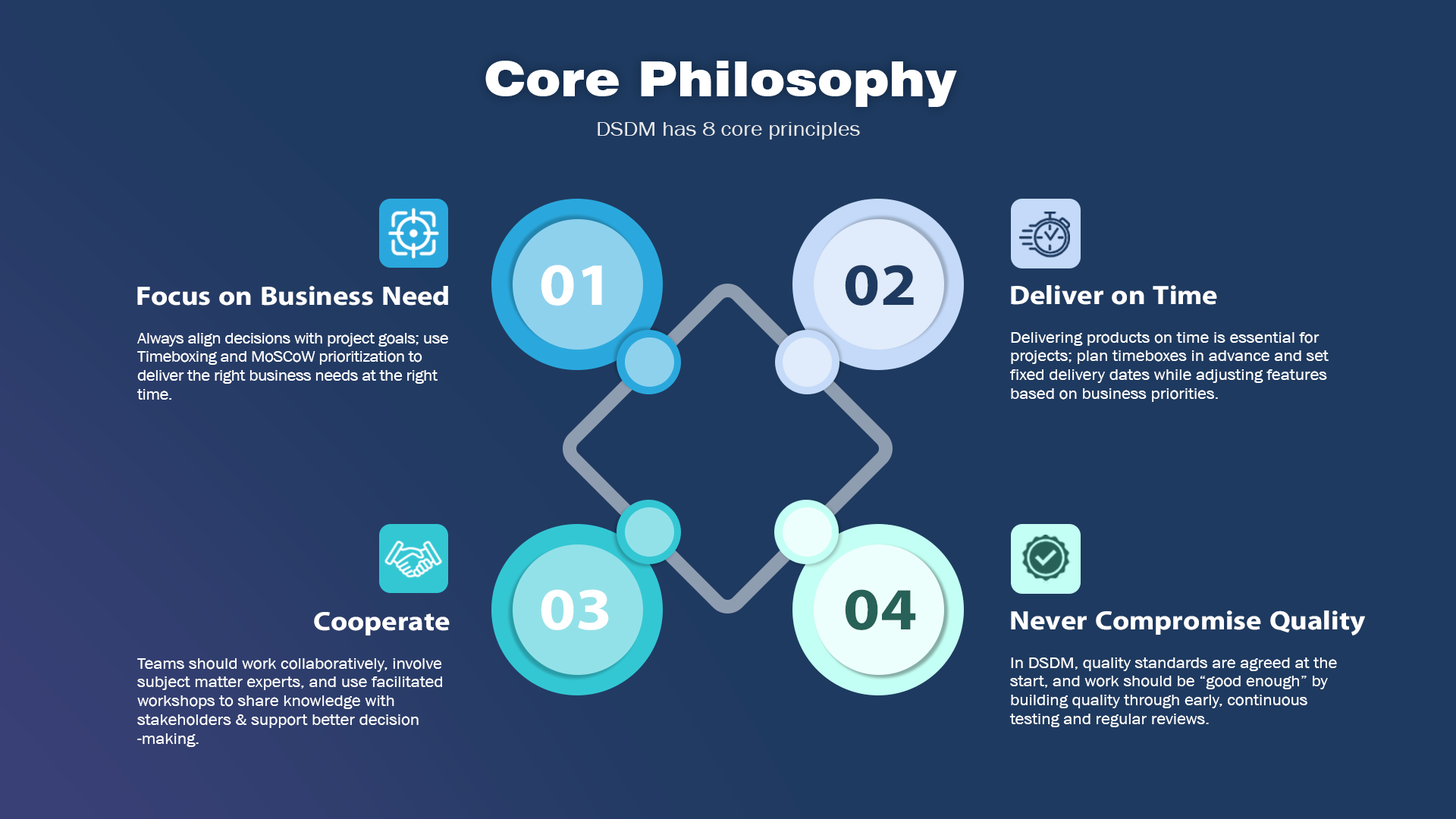
<style>
.page{position:relative;width:1456px;height:819px;background:#1e3a60}
.page>*{position:absolute;margin:0}
.t1{font:48.5px "Swiss721BT-Black";color:#ffffff;scale:1.1 1}
.t2{font:20.5px "AA-Khmer-AngDaunPov";color:#ffffff;scale:1.1 1}
.t3{font:60.2px "iKampuchea001_O'Chrov";color:#ffffff;scale:1.1 1}
.t4{font:60px "iKampuchea001_O'Chrov";color:#1e3a60;scale:1.1 1}
.t5{font:26.8px "iKampuchea001_O'Chrov";color:#ffffff;scale:1.1 1}
.t6{font:15.7px "AA-Khmer-AngDaunPov";letter-spacing:-0.019em;color:#ffffff;scale:1.1 1}
.t7{font:15.7px "AA-Khmer-AngDaunPov";color:#ffffff;scale:1.1 1}
.t8{font:60px "iKampuchea001_O'Chrov";color:#ffffff;scale:1.1 1}
.t9{font:60px "iKampuchea001_O'Chrov";color:#276157;scale:1.1 1}
</style>
<div class="page">
<p class="t1" style="left:485px;top:61px;width:472px;height:46px">Core Philosophy</p>
<p class="t2" style="left:598px;top:122px;width:262px;height:18px;opacity:0.86">DSDM has 8 core principles</p>
<p class="t3" style="left:541px;top:265px;width:61px;height:41px">01</p>
<p class="t4" style="left:845px;top:265px;width:69px;height:41px">02</p>
<p class="t5" style="left:137px;top:286px;width:311px;height:20px">Focus on Business Need</p>
<p class="t5" style="left:1011px;top:285px;width:206px;height:20px">Deliver on Time</p>
<p class="t6" style="left:137px;top:333px;width:311px;height:67px">Always align decisions with project goals; use <br>Timeboxing and MoSCoW prioritization to <br>deliver the right business needs at the right <br>time.</p>
<p class="t7" style="left:1010px;top:332px;width:319px;height:70px">Delivering products on time is essential for <br>projects; plan timeboxes in advance and set<br>fixed delivery dates while adjusting features<br>based on business priorities.</p>
<p class="t8" style="left:541px;top:589px;width:68px;height:41px">03</p>
<p class="t9" style="left:845px;top:589px;width:71px;height:41px">04</p>
<p class="t5" style="left:314px;top:612px;width:136px;height:23px">Cooperate</p>
<p class="t5" style="left:1011px;top:610px;width:354px;height:25px">Never Compromise Quality</p>
<p class="t7" style="left:137px;top:658px;width:305px;height:89px">Teams should work collaboratively, involve <br>subject matter experts, and use facilitated <br>workshops to share knowledge with <br>stakeholders &amp; support better decision<br>-making.</p>
<p class="t7" style="left:1009px;top:657px;width:328px;height:70px">In DSDM, quality standards are agreed at the <br>start, and work should be “good enough” by <br>building quality through early, continuous <br>testing and regular reviews.</p>
</div>
